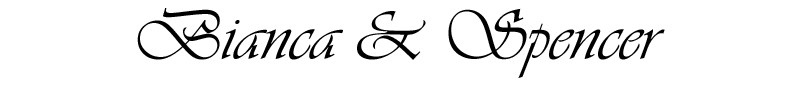
<style>
.page{position:relative;width:790px;height:85px;background:#ffffff}
.page>*{position:absolute;margin:0}
.t1{font:72px "Vivaldii";color:#000000}
</style>
<div class="page">
<p class="t1" style="left:137px;top:8px;width:528px;height:70px">Bianca &amp; Spencer</p>
</div>
